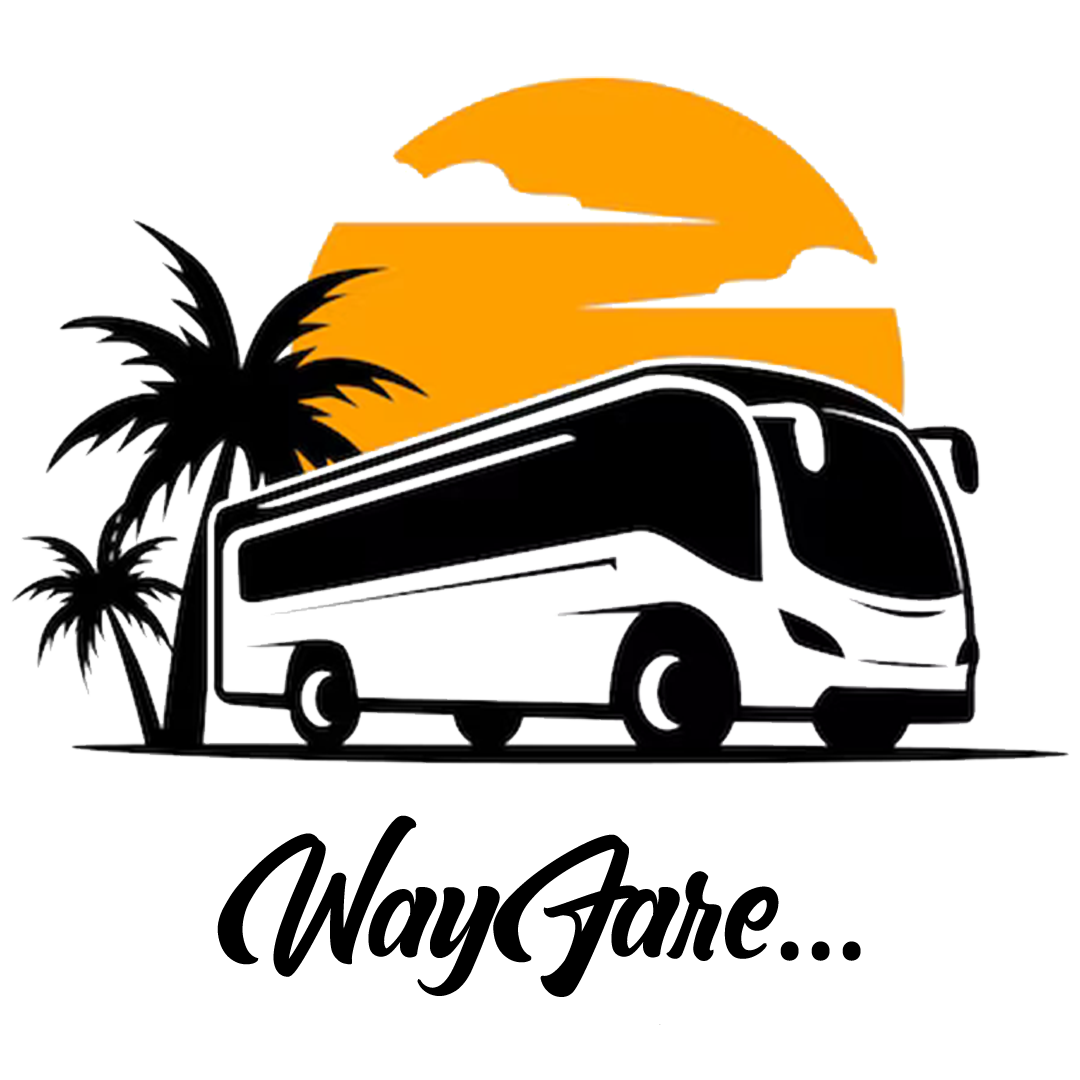
<style>
.page{position:relative;width:1080px;height:1080px;background:#ffffff}
.page>*{position:absolute;margin:0}
.t1{font:150px "AbeganshiRegular";color:#000000}
.t2{font:150px "MyriadPro-Regular";color:#000000}
</style>
<div class="page">
<p class="t1" style="left:217px;top:815px;width:644px;height:210px">WayFare<span class="t2">...</span></p>
</div>
